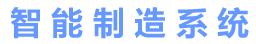
<style>
.page{position:relative;width:256px;height:44px;background:#ffffff}
.page>*{position:absolute;margin:0}
.t1{font:32px "MicrosoftYaHei-Bold";color:#6699ff}
.t2{font:32px "MicrosoftYaHei-Bold";color:#ffffff}
</style>
<div class="page">
<p class="t1" style="left:10px;top:7px;width:239px;height:32px"><span class="t2"> </span>智 能 制 造 系 统</p>
</div>
